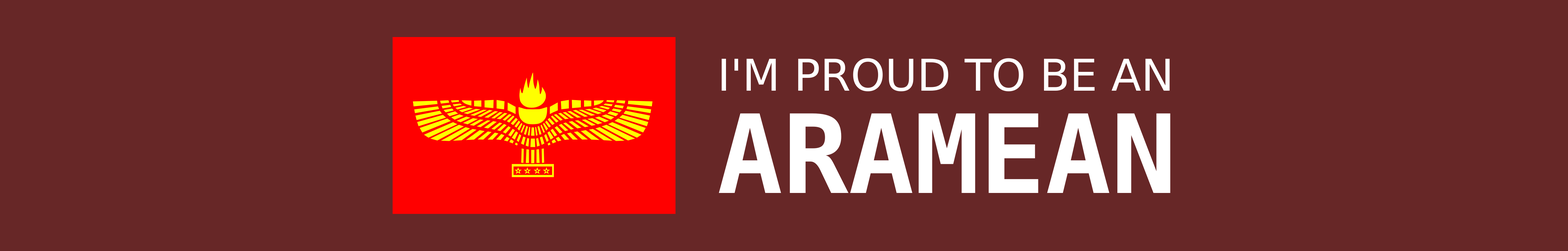
<style>
.page{position:relative;width:1568px;height:251px;background:#672727}
.page>*{position:absolute;margin:0}
.t1{font:43.7px "DejaVuSans";color:#ffffff}
.t2{font:109.1px "DejaVuSansMono-Bold";color:#ffffff}
</style>
<div class="page">
<p class="t1" style="left:722px;top:58px;width:448px;height:33px">I'M PROUD TO BE AN</p>
<p class="t2" style="left:719px;top:113px;width:451px;height:80px">ARAMEAN</p>
</div>
